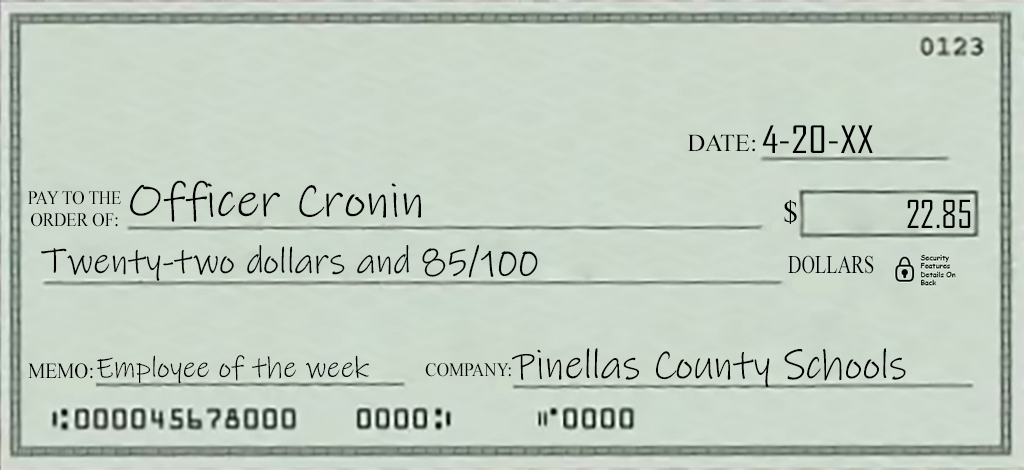
<style>
.page{position:relative;width:1024px;height:470px}
.page>*{position:absolute;margin:0}
.t1{font:36.2px "AgencyFB-Reg";color:#000000;scale:1.2 1}
.t2{font:24.5px "TimesNewRomanPSMT";color:#000000}
.t3{font:48.2px "InkFree";color:#000000;scale:1.06 1}
.t4{font:19px "TimesNewRomanPSMT";color:#000000;scale:0.9 1}
.t5{font:30.5px "TimesNewRomanPSMT";color:#000000}
.t6{font:37px "AgencyFB-Reg";color:#000000}
.t7{font:37.1px "InkFree";color:#000000}
.t8{font:25.5px "TimesNewRomanPSMT";color:#000000;scale:0.73 1}
.t9{font:42.1px "InkFree";color:#000000}
.t10{font:21.9px "TimesNewRomanPSMT";color:#000000;scale:0.89 1}
.t11{font:29.9px "InkFree";color:#000000}
</style>
<div class="page">
<p class="t1" style="left:762px;top:125px;width:111px;height:28px">4-20-XX</p>
<p class="t2" style="left:687px;top:134px;width:68px;height:18px">DATE:</p>
<p class="t3" style="left:130px;top:180px;width:291px;height:42px">Officer Cronin</p>
<p class="t4" style="left:28px;top:191px;width:93px;height:36px;text-align:center">PAY TO THE<br>ORDER OF:</p>
<p class="t5" style="left:784px;top:200px;width:13px;height:24px">$</p>
<p class="t6" style="left:907px;top:199px;width:64px;height:29px">22.85</p>
<p class="t7" style="left:41px;top:244px;width:497px;height:37px">Twenty-two dollars and 85/100</p>
<p class="t8" style="left:788px;top:255px;width:86px;height:19px">DOLLARS</p>
<p class="t9" style="left:512px;top:348px;width:394px;height:39px">Pinellas County Schools</p>
<p class="t10" style="left:28px;top:363px;width:65px;height:16px">MEMO:</p>
<p class="t11" style="left:97px;top:355px;width:272px;height:29px">Employee of the week</p>
<p class="t4" style="left:425px;top:363px;width:86px;height:14px">COMPANY:</p>
</div>
